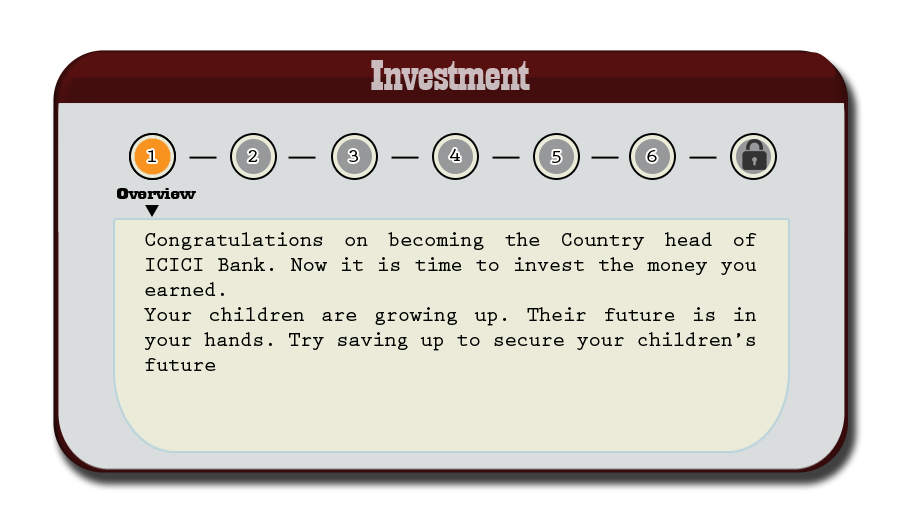
<style>
.page{position:relative;width:910px;height:512px;background:#eaebd8}
.page>*{position:absolute;margin:0}
.t1{font:44.6px "Playbill";letter-spacing:-0.025em;color:#c8bbbe;scale:1.61 1}
.t2{font:18.8px "PrestigeEliteStd-Bd";letter-spacing:-0.025em;color:#020201;scale:1.18 1}
.t3{font:17.3px "Playbill";letter-spacing:-0.025em;color:#020201;scale:2.47 1}
.t4{font:20.8px "PrestigeEliteStd-Bd";letter-spacing:-0.025em;color:#020201}
</style>
<div class="page">
<p class="t1" style="left:371px;top:60px;width:159px;height:30px">Investment</p>
<p class="t2" style="left:148px;top:150px;width:8px;height:12px">1</p>
<p class="t2" style="left:248px;top:150px;width:10px;height:12px">2</p>
<p class="t2" style="left:349px;top:150px;width:9px;height:12px">3</p>
<p class="t2" style="left:449px;top:148px;width:11px;height:13px">4</p>
<p class="t2" style="left:647px;top:150px;width:10px;height:12px">6</p>
<p class="t2" style="left:551px;top:151px;width:10px;height:12px">5</p>
<p class="t3" style="left:117px;top:188px;width:79px;height:11px">Overview</p>
<p class="t4" style="left:144px;top:232px;width:613px;height:139px;text-align:justify">Congratulations on becoming the Country head of ICICI Bank. Now it is time to invest the money you earned.<br>Your children are growing up. Their future is in your hands. Try saving up to secure your children’s future</p>
</div>
